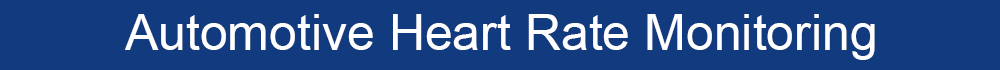
<style>
.page{position:relative;width:1000px;height:70px;background:#123b7f}
.page>*{position:absolute;margin:0}
.t1{font:50px "ArialMT";color:#ffffff}
</style>
<div class="page">
<p class="t1" style="left:125px;top:14px;width:750px;height:46px">Automotive Heart Rate Monitoring</p>
</div>
